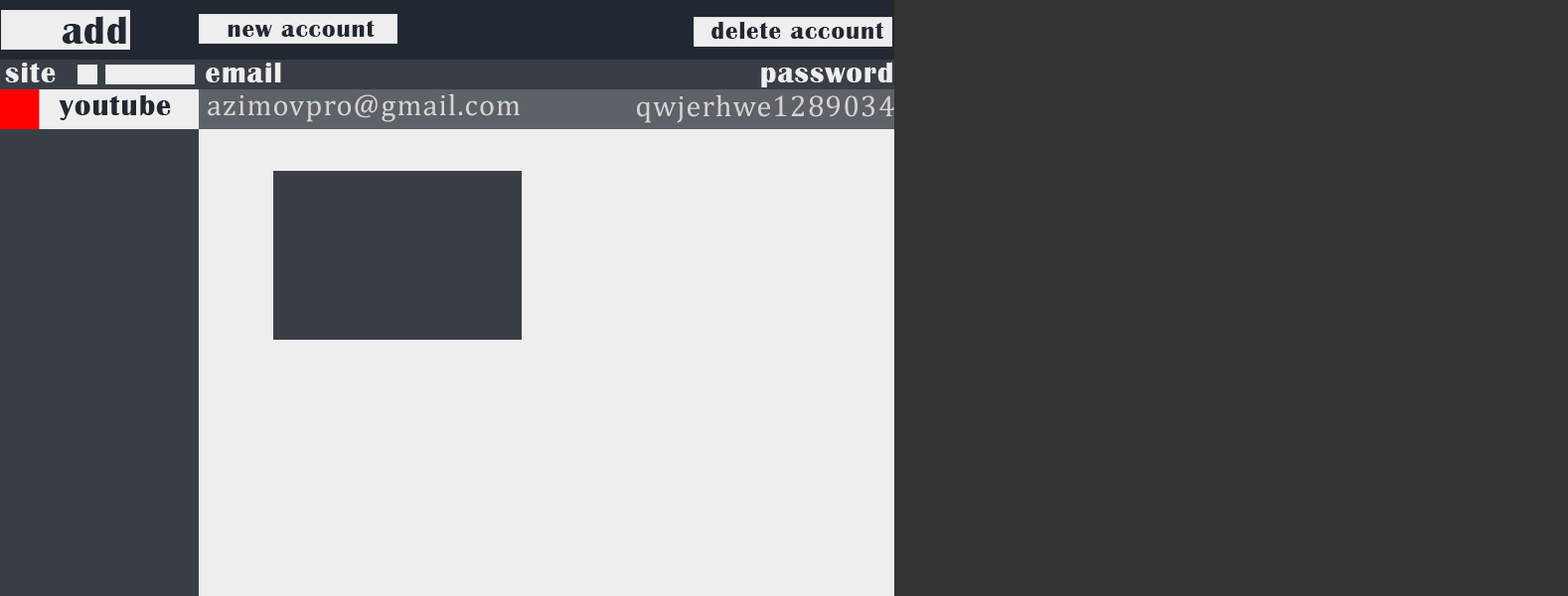
<style>
.page{position:relative;width:1568px;height:596px;background:#333333}
.page>*{position:absolute;margin:0}
.t1{font:40.1px "BritannicBold";letter-spacing:0.04em;color:#222831}
.t2{font:25.1px "BritannicBold";letter-spacing:0.04em;color:#222831}
.t3{font:30.1px "BritannicBold";letter-spacing:0.04em;color:#eeeeee}
.t4{font:30.1px "CambriaMath";letter-spacing:0.04em;color:#d4d4d4}
</style>
<div class="page">
<p class="t1" style="left:62px;top:16px;width:64px;height:28px">add</p>
<p class="t2" style="left:228px;top:20px;width:147px;height:17px">new account</p>
<p class="t2" style="left:711px;top:21px;width:173px;height:18px">delete account</p>
<p class="t3" style="left:5px;top:63px;width:51px;height:19px">site</p>
<p class="t3" style="left:206px;top:62px;width:75px;height:20px">email</p>
<p class="t3" style="left:761px;top:62px;width:131px;height:25px">password</p>
<p class="t4" style="left:208px;top:93px;width:312px;height:29px">azimovpro@gmail.com</p>
<p class="t4" style="left:637px;top:94px;width:257px;height:29px">qwjerhwe1289034</p>
</div>
